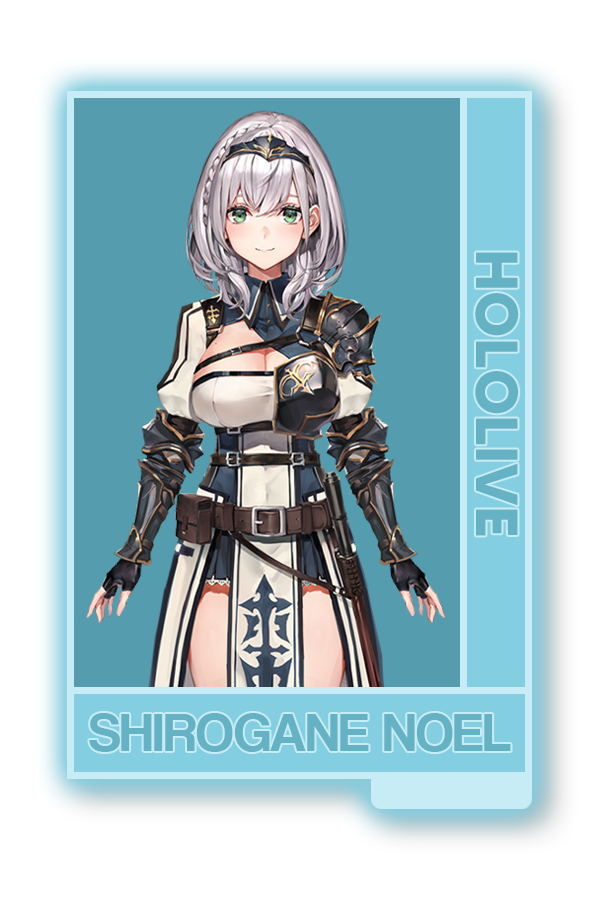
<style>
.page{position:relative;width:600px;height:900px;background:#ffffff}
.page>*{position:absolute;margin:0}
.t1{font:59.2px "MADETOMMY-Bold";color:#66b2c5}
.t2{font:55.9px "CoolveticaRg-Regular";color:#66b2c5}
</style>
<div class="page">
<p class="t1" style="left:475px;top:252px;width:44px;height:284px;rotate:90deg">HOLOLIVE</p>
<p class="t2" style="left:89px;top:713px;width:422px;height:39px">SHIROGANE NOEL</p>
</div>
